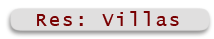
<style>
.page{position:relative;width:214px;height:39px;background:#e0dfdf}
.page>*{position:absolute;margin:0}
.t1{font:19px "LucidaConsole";letter-spacing:0.1em;color:#790102}
</style>
<div class="page">
<p class="t1" style="left:37px;top:11px;width:142px;height:15px">Res: Villas</p>
</div>
